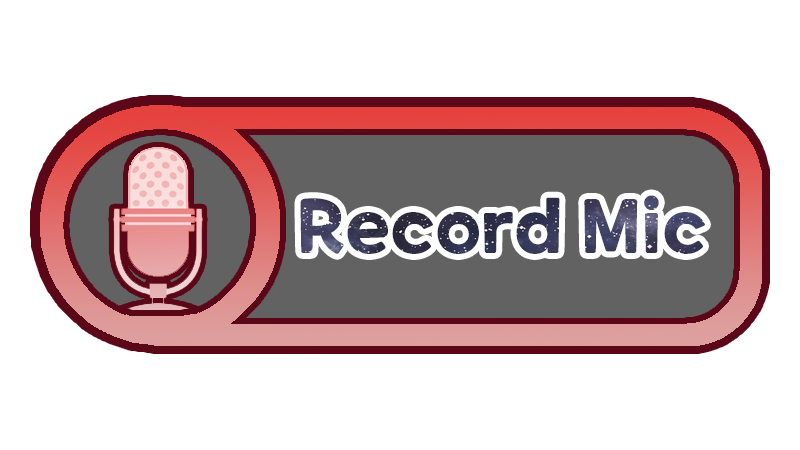
<style>
.page{position:relative;width:800px;height:450px;background:#ffffff}
.page>*{position:absolute;margin:0}
.t1{font:72px "ONEMobilePOPOTFRegular"}
</style>
<div class="page">
<p class="t1" style="left:300px;top:195px;width:405px;height:59px">Record Mic</p>
</div>
